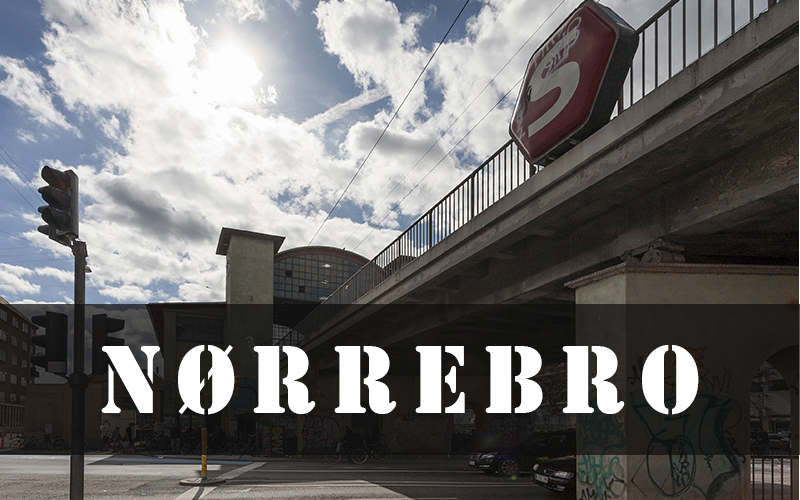
<style>
.page{position:relative;width:800px;height:500px}
.page>*{position:absolute;margin:0}
.t1{font:100px "Stencil";letter-spacing:0.15em;color:#ffffff;scale:0.95 1}
</style>
<div class="page">
<p class="t1" style="left:101px;top:345px;width:598px;height:70px">Nørrebro</p>
</div>
